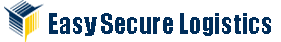
<style>
.page{position:relative;width:281px;height:42px;background:#ffffff}
.page>*{position:absolute;margin:0}
.t1{font:25.6px "Impact";color:#002e5b}
</style>
<div class="page">
<p class="t1" style="left:49px;top:13px;width:222px;height:23px">Easy Secure Logistics</p>
</div>
